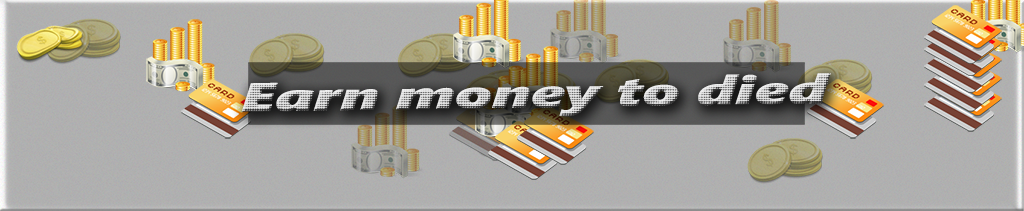
<style>
.page{position:relative;width:1024px;height:211px}
.page>*{position:absolute;margin:0}
.t1{font:40.2px "SegoeUIBlack-Italic";scale:1.54 1}
</style>
<div class="page">
<p class="t1" style="left:241px;top:73px;width:590px;height:44px;rotate:-1deg">Earn money to died</p>
</div>
